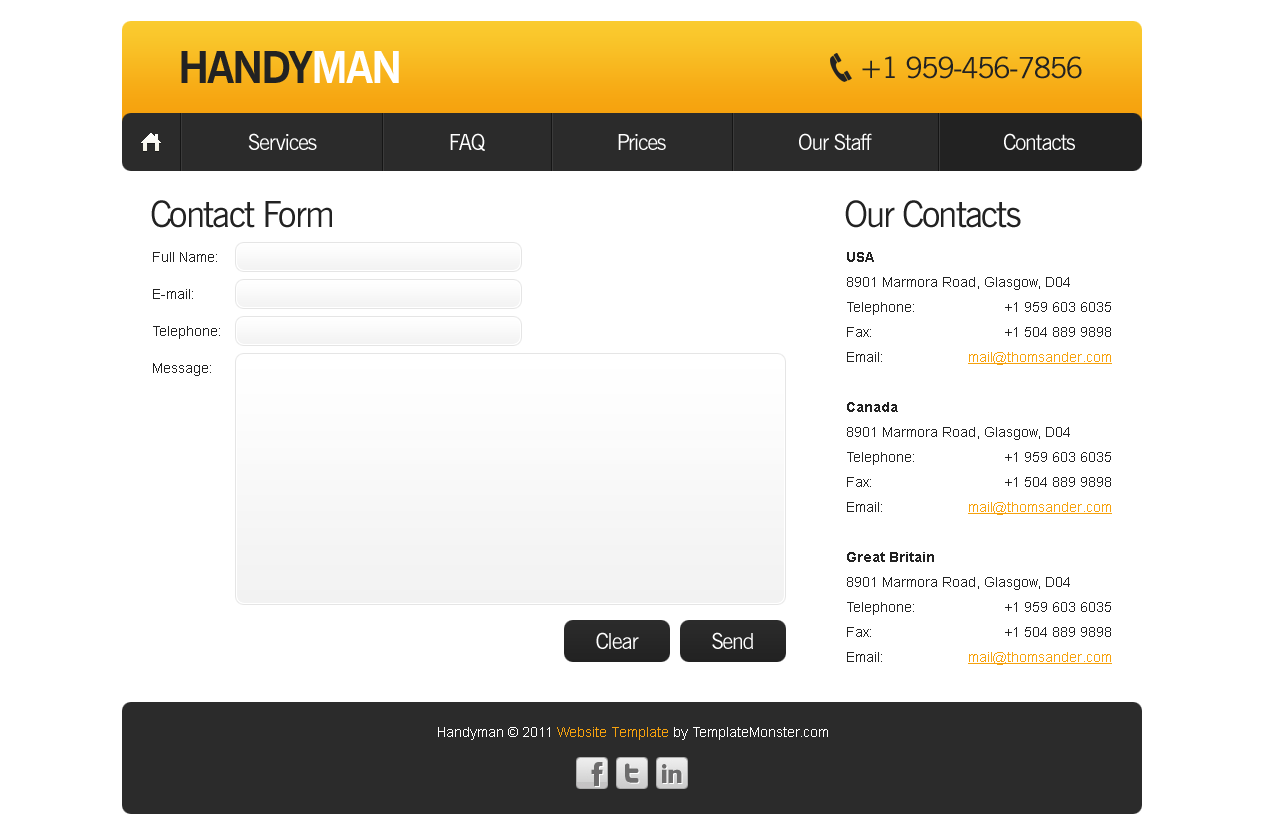
<style>
.page{position:relative;width:1264px;height:834px;background:#ffffff}
.page>*{position:absolute;margin:0}
.t1{font:44px "NewsGothicBT-Bold";letter-spacing:-0.05em;color:#222222;text-transform:uppercase}
.t2{font:44px "NewsGothicBT-Bold";letter-spacing:-0.05em;color:#ffffff;text-transform:uppercase}
.t3{font:29px "NewsGothicBT-Roman";letter-spacing:-0.05em;color:#222222;text-transform:uppercase}
.t4{font:22px "NewsGothicBT-Roman";letter-spacing:-0.05em;color:#ffffff}
.t5{font:36px "NewsGothicBT-Roman";letter-spacing:-0.05em;color:#222222}
.t6{font:14px/37px "ArialMT";color:#222222}
.t7{font:14px/25px "ArialMT";color:#222222}
.t8{font:14px/25px "Arial-BoldMT";color:#222222}
.t9{font:14px/25px "ArialMT";color:#f6a20e;text-decoration:underline}
.t10{font:14px "ArialMT";color:#ffffff}
.t11{font:14px "ArialMT";color:#f6a20e}
</style>
<div class="page">
<p class="t1" style="left:181px;top:51px;width:218px;height:32px">Handy<span class="t2">man</span></p>
<p class="t3" style="left:862px;top:56px;width:220px;height:23px">+1 959-456-7856</p>
<p class="t4" style="left:248px;top:133px;width:827px;height:18px">Services                        FAQ                        Prices                        Our Staff                        Contacts</p>
<p class="t5" style="left:151px;top:200px;width:181px;height:28px">Contact Form</p>
<p class="t5" style="left:845px;top:200px;width:176px;height:28px">Our Contacts</p>
<p class="t6" style="left:153px;top:252px;width:67px;height:124px">Full Name:<br>E-mail:<br>Telephone:<br>Message:</p>
<p class="t7" style="left:847px;top:252px;width:223px;height:410px"><span class="t8">USA<br></span>8901 Marmora Road, Glasgow, D04<br>Telephone:<br>Fax:<br>Email:<br><br><span class="t8">Canada<br></span>8901 Marmora Road, Glasgow, D04<br>Telephone:<br>Fax:<br>Email:<br><br><span class="t8">Great Britain<br></span>8901 Marmora Road, Glasgow, D04<br>Telephone:<br>Fax:<br>Email:</p>
<p class="t7" style="left:968px;top:302px;width:144px;height:363px;text-align:right">+1 959 603 6035<br>+1 504 889 9898<br><span class="t9">mail@thomsander.com<br><br></span><br><br>+1 959 603 6035<br>+1 504 889 9898<br><span class="t9">mail@thomsander.com<br><br></span><br><br>+1 959 603 6035<br>+1 504 889 9898<br><span class="t9">mail@thomsander.com<br><br></span><br><br>+1 959 603 6035<br>+1 504 889 9898<br>mail@thomsander.com</p>
<p class="t4" style="left:596px;top:632px;width:43px;height:17px">Clear</p>
<p class="t4" style="left:712px;top:632px;width:41px;height:17px">Send</p>
<p class="t10" style="left:438px;top:727px;width:390px;height:13px">Handyman © 2011 <span class="t11">Website Template</span> by TemplateMonster.com</p>
</div>
